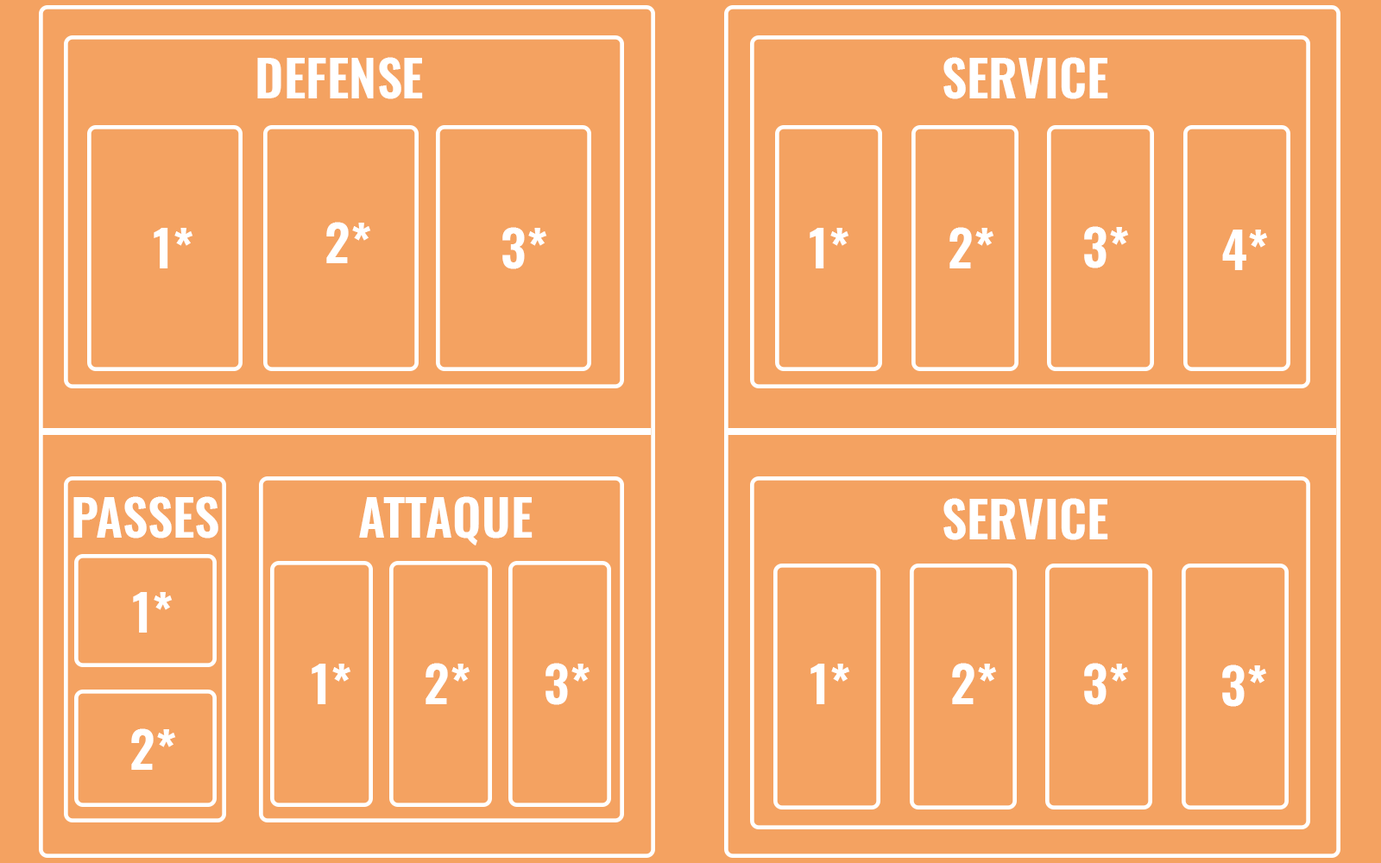
<style>
.page{position:relative;width:1381px;height:863px;background:#f4a261}
.page>*{position:absolute;margin:0}
.t1{font:50.4px "Oswald-SemiBold";color:#ffffff}
</style>
<div class="page">
<p class="t1" style="left:257px;top:57px;width:166px;height:42px">DEFENSE</p>
<p class="t1" style="left:944px;top:57px;width:164px;height:42px">SERVICE</p>
<p class="t1" style="left:326px;top:222px;width:45px;height:41px">2*</p>
<p class="t1" style="left:154px;top:228px;width:39px;height:40px">1*</p>
<p class="t1" style="left:502px;top:227px;width:45px;height:42px">3*</p>
<p class="t1" style="left:810px;top:228px;width:39px;height:40px">1*</p>
<p class="t1" style="left:950px;top:227px;width:45px;height:41px">2*</p>
<p class="t1" style="left:1084px;top:226px;width:45px;height:42px">3*</p>
<p class="t1" style="left:1222px;top:230px;width:46px;height:40px">4*</p>
<p class="t1" style="left:73px;top:496px;width:145px;height:43px">PASSES</p>
<p class="t1" style="left:359px;top:496px;width:174px;height:50px">ATTAQUE</p>
<p class="t1" style="left:944px;top:498px;width:164px;height:42px">SERVICE</p>
<p class="t1" style="left:133px;top:592px;width:40px;height:41px">1*</p>
<p class="t1" style="left:312px;top:664px;width:39px;height:40px">1*</p>
<p class="t1" style="left:426px;top:663px;width:44px;height:41px">2*</p>
<p class="t1" style="left:546px;top:663px;width:44px;height:42px">3*</p>
<p class="t1" style="left:811px;top:664px;width:39px;height:40px">1*</p>
<p class="t1" style="left:952px;top:663px;width:45px;height:41px">2*</p>
<p class="t1" style="left:1084px;top:663px;width:45px;height:42px">3*</p>
<p class="t1" style="left:1222px;top:665px;width:45px;height:42px">3*</p>
<p class="t1" style="left:131px;top:729px;width:45px;height:41px">2*</p>
</div>
